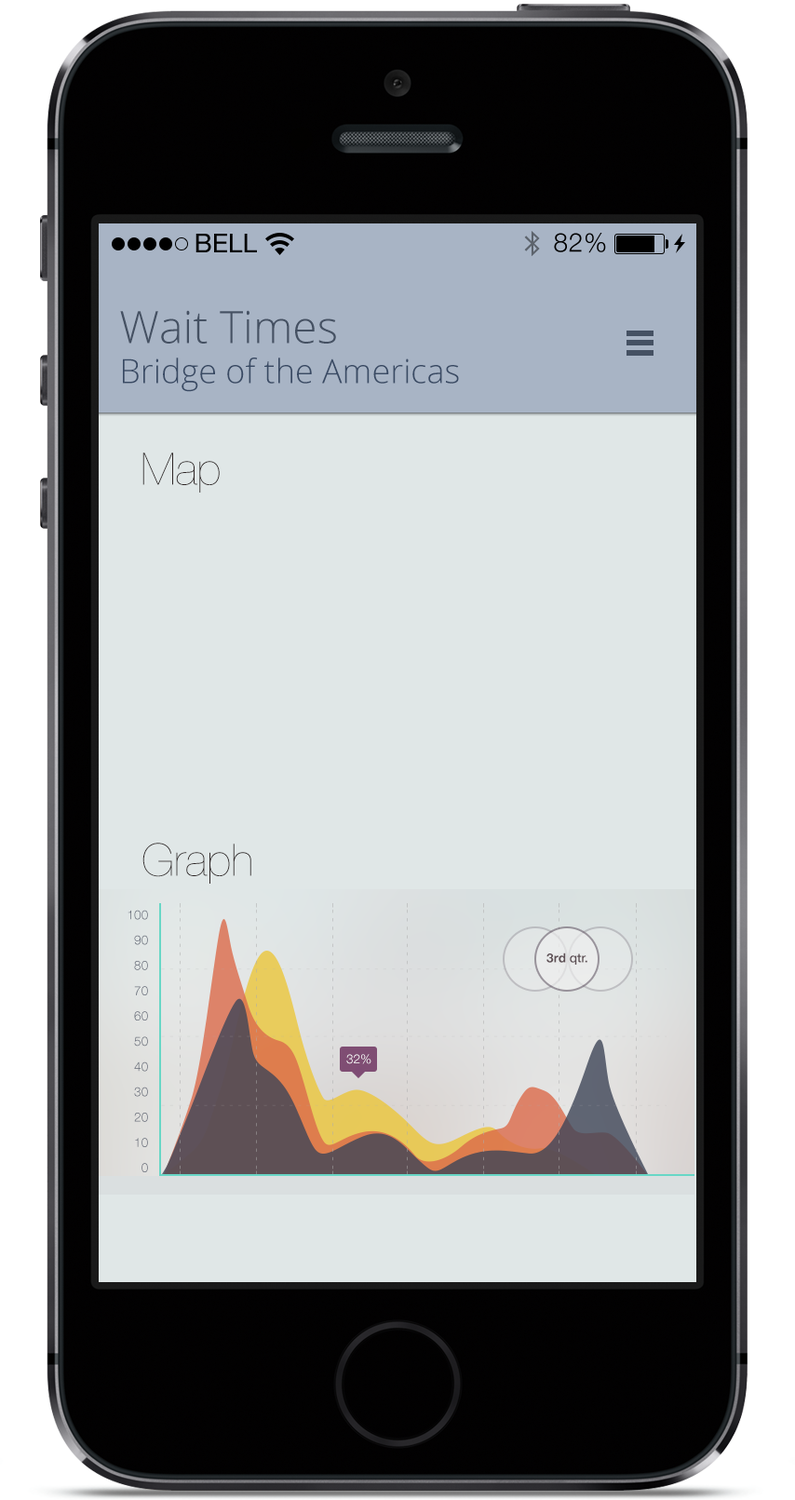
<style>
.page{position:relative;width:795px;height:1500px;background:#e0e7e7}
.page>*{position:absolute;margin:0}
.t1{font:44.7px "OpenSans-Light";color:#455163}
.t2{font:33.5px "OpenSans-Light";color:#394a64}
.t3{font:44.7px "HelveticaNeue-UltraLight";color:#2d2525}
</style>
<div class="page">
<p class="t1" style="left:120px;top:310px;width:216px;height:34px">Wait Times</p>
<p class="t2" style="left:123px;top:357px;width:336px;height:35px">Bridge of the Americas</p>
<p class="t3" style="left:142px;top:452px;width:78px;height:40px">Map</p>
<p class="t3" style="left:142px;top:843px;width:109px;height:40px">Graph</p>
</div>
